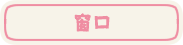
<style>
.page{position:relative;width:183px;height:45px;background:#f7f3e9}
.page>*{position:absolute;margin:0}
.t1{font:12px "shetumodengxiaofangti";color:#ef8da2;font-weight:bold;scale:0.94 1}
</style>
<div class="page">
<p class="t1" style="left:74px;top:13px;width:36px;height:19px">窗口</p>
</div>
